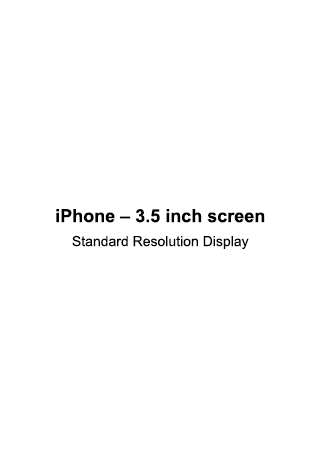
<style>
.page{position:relative;width:320px;height:460px;background:#ffffff}
.page>*{position:absolute;margin:0}
.t1{font:14px/24px "ArialMT";color:#000000}
.t2{font:18px/24px "Arial-BoldMT";color:#000000}
</style>
<div class="page">
<p class="t1" style="left:56px;top:209px;width:209px;height:41px;text-align:center"><span class="t2">iPhone – 3.5 inch screen<br></span>Standard Resolution Display</p>
</div>
